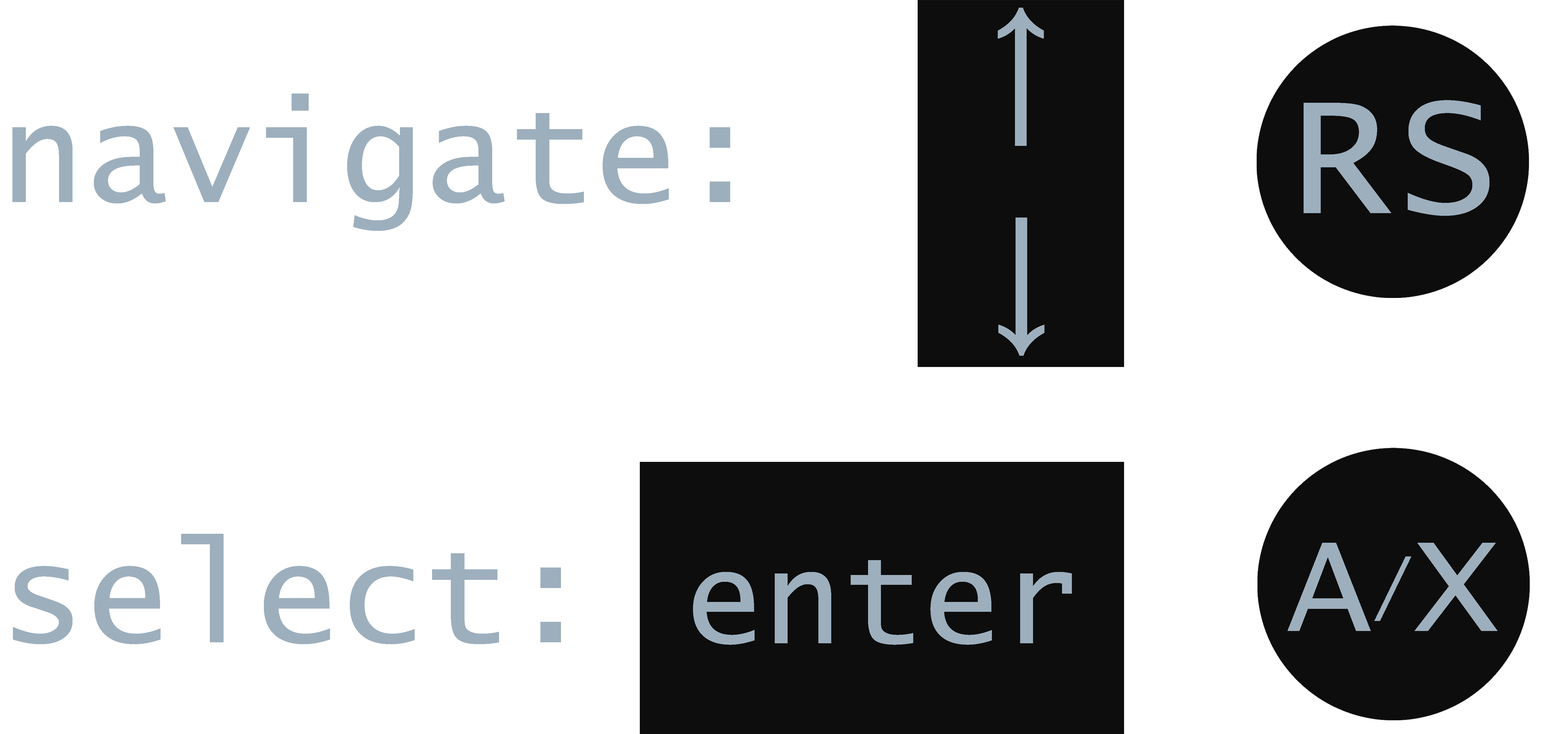
<style>
.page{position:relative;width:1568px;height:734px;background:#ffffff}
.page>*{position:absolute;margin:0}
.t1{font:140.6px "LucidaConsole";color:#9dafbd}
.t2{font:175.7px "LucidaConsole";color:#9dafbd}
.t3{font:70.3px "LucidaConsole";color:#9dafbd}
</style>
<div class="page">
<p class="t1" style="left:12px;top:94px;width:718px;height:137px">navigate:</p>
<p class="t2" style="left:1304px;top:100px;width:186px;height:116px">RS</p>
<p class="t1" style="left:13px;top:534px;width:548px;height:111px">select:@</p>
<p class="t1" style="left:1288px;top:543px;width:210px;height:88px">A X</p>
<p class="t3" style="left:1374px;top:557px;width:37px;height:64px">/</p>
</div>
